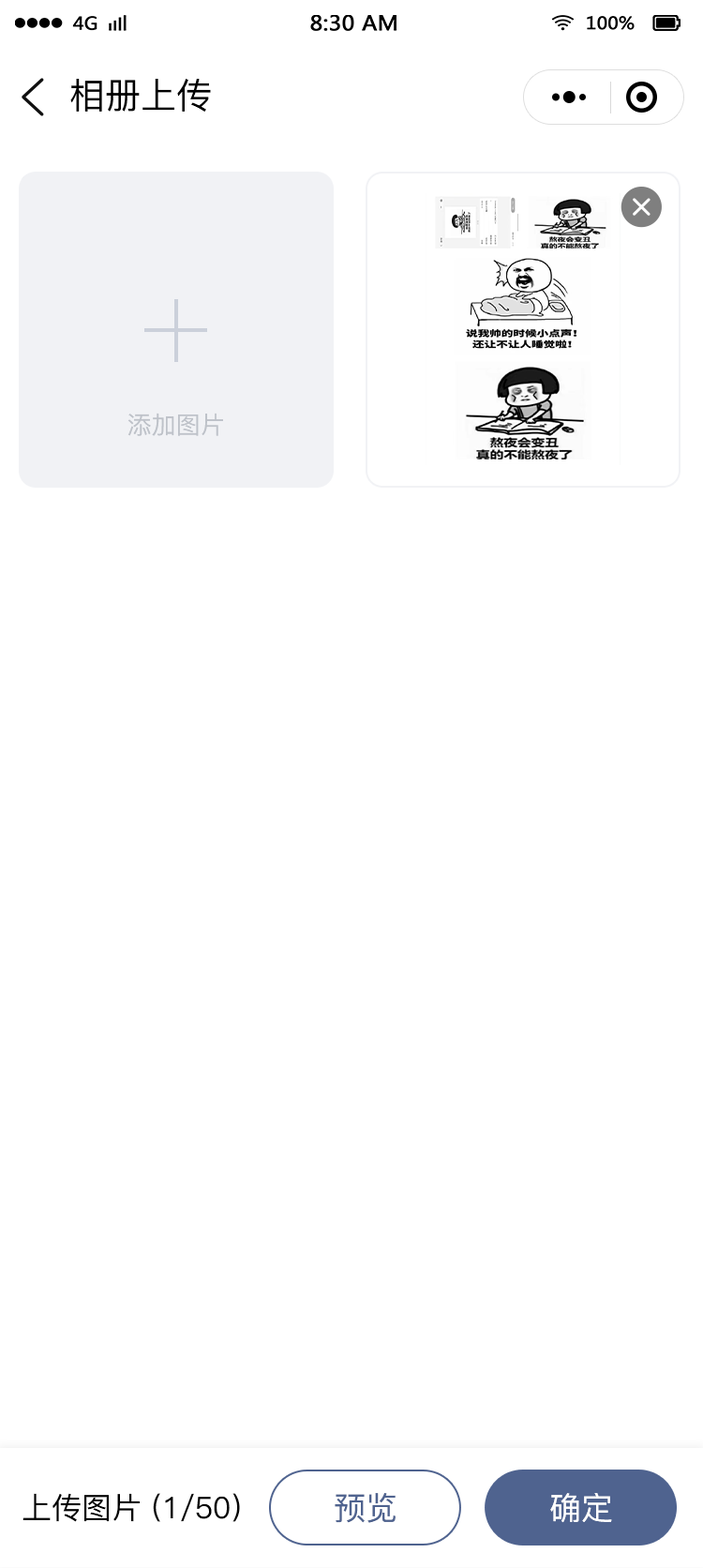
<style>
.page{position:relative;width:703px;height:1568px;background:#ffffff}
.page>*{position:absolute;margin:0}
.t1{font:35.6px "PingFang-SC-Medium";color:#000000}
.t2{font:24.4px "PingFang-SC-Medium";color:#bec2c9}
.t3{font:30px "PingFang-SC-Medium";color:#000000}
.t4{font:31.9px "PingFang-SC-Medium";color:#4f638f}
.t5{font:31.9px "PingFang-SC-Medium";color:#ffffff}
</style>
<div class="page">
<p class="t1" style="left:70px;top:79px;width:141px;height:33px">相册上传</p>
<p class="t2" style="left:128px;top:413px;width:95px;height:23px">添加图片</p>
<p class="t3" style="left:23px;top:1493px;width:217px;height:29px">上传图片 (1/50）</p>
<p class="t4" style="left:335px;top:1493px;width:61px;height:30px">预览</p>
<p class="t5" style="left:550px;top:1493px;width:62px;height:30px">确定</p>
</div>
